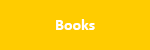
<style>
.page{position:relative;width:150px;height:50px;background:#ffcc00}
.page>*{position:absolute;margin:0}
.t1{font:16px "Calibri-Bold";color:#ffffff}
</style>
<div class="page">
<p class="t1" style="left:56px;top:19px;width:39px;height:11px">Books</p>
</div>
